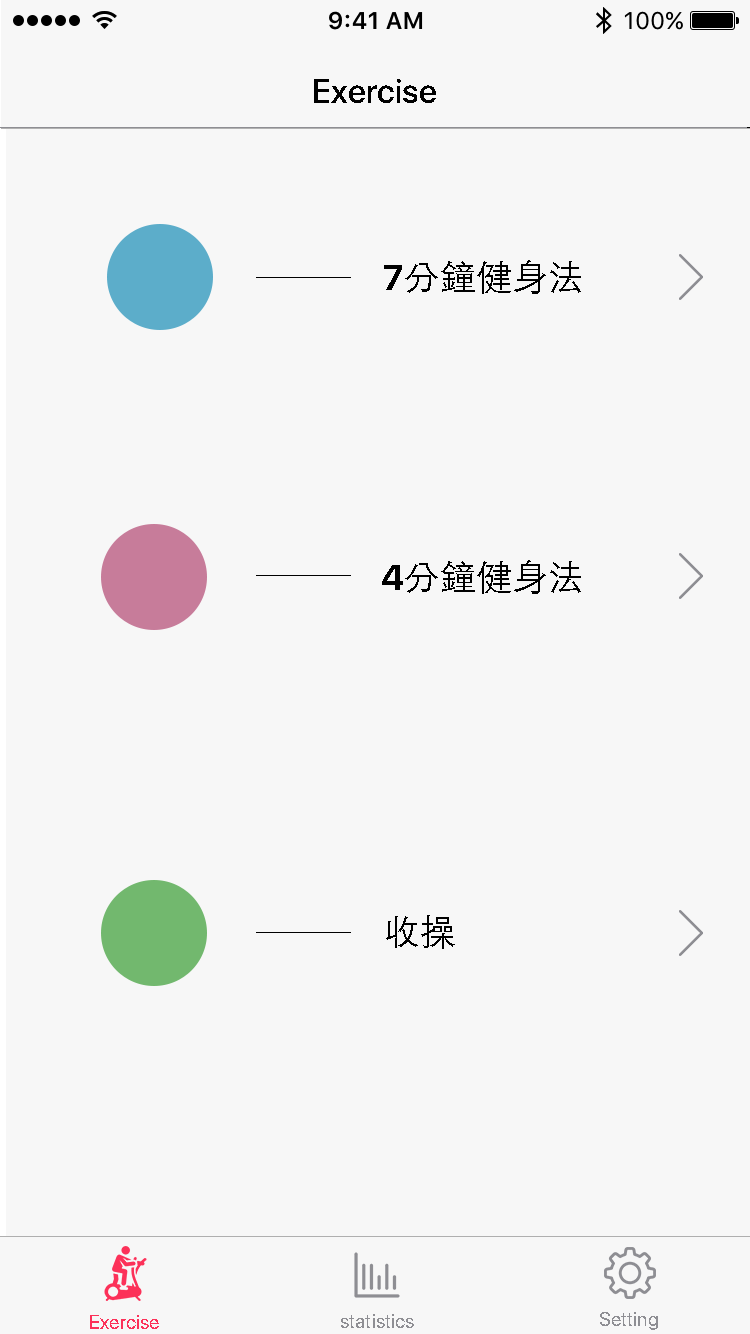
<style>
.page{position:relative;width:750px;height:1334px;background:#f7f7f7}
.page>*{position:absolute;margin:0}
.t1{font:34px "SFUIDisplay-Medium";color:#000000}
.t2{font:36px "STHeitiTC-Light";color:#000000}
.t3{font:36px "SFUIDisplay-Bold";color:#000000}
.t4{font:20px "SFUIDisplay-Regular";color:#8e8e93}
.t5{font:20px "SFUIDisplay-Regular";color:#fc3159}
</style>
<div class="page">
<p class="t1" style="left:314px;top:79px;width:122px;height:24px">Exercise</p>
<p class="t2" style="left:384px;top:260px;width:197px;height:34px"><span class="t3">7</span>分鐘健身法</p>
<p class="t2" style="left:382px;top:560px;width:199px;height:34px"><span class="t3">4</span>分鐘健身法</p>
<p class="t2" style="left:386px;top:915px;width:69px;height:34px">收操</p>
<p class="t4" style="left:600px;top:1312px;width:58px;height:18px">Setting</p>
<p class="t5" style="left:90px;top:1315px;width:69px;height:14px">Exercise</p>
<p class="t4" style="left:341px;top:1314px;width:73px;height:14px">statistics</p>
</div>
